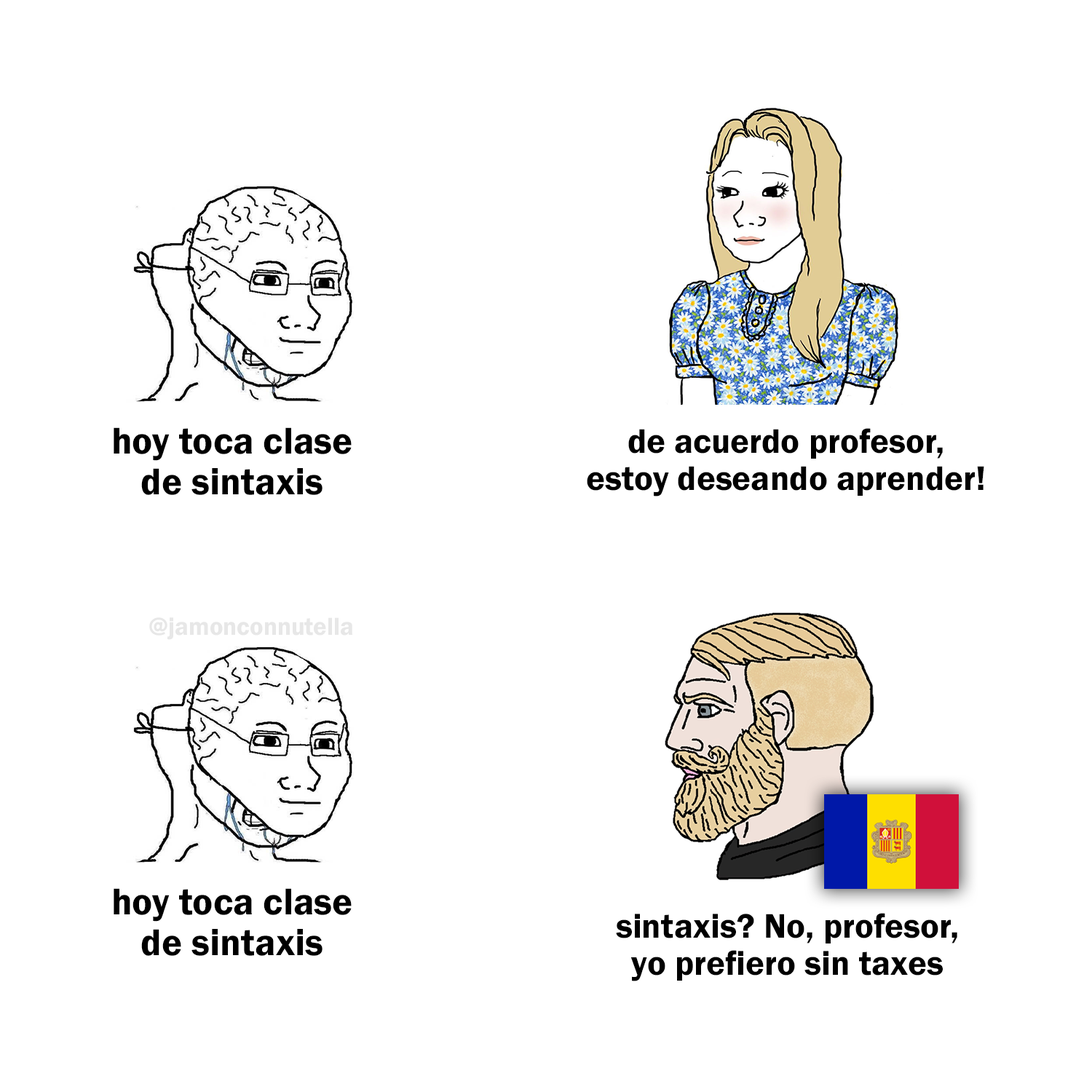
<style>
.page{position:relative;width:1092px;height:1092px;background:#ffffff}
.page>*{position:absolute;margin:0}
.t1{font:38.5px "FranklinGothic-Demi";color:#000000}
.t2{font:35.4px "FranklinGothic-Demi";color:#000000}
.t3{font:25.2px "FranklinGothic-Demi";color:#e7e7e7}
</style>
<div class="page">
<p class="t1" style="left:114px;top:427px;width:238px;height:68px;text-align:center">hoy toca clase<br>de sintaxis</p>
<p class="t2" style="left:587px;top:428px;width:397px;height:68px;text-align:center">de acuerdo profesor,<br>estoy deseando aprender!</p>
<p class="t3" style="left:149px;top:617px;width:204px;height:23px">@jamonconnutella</p>
<p class="t1" style="left:114px;top:888px;width:238px;height:68px;text-align:center">hoy toca clase<br>de sintaxis</p>
<p class="t2" style="left:616px;top:913px;width:341px;height:68px;text-align:center">sintaxis? No, profesor,<br>yo prefiero sin taxes</p>
</div>
